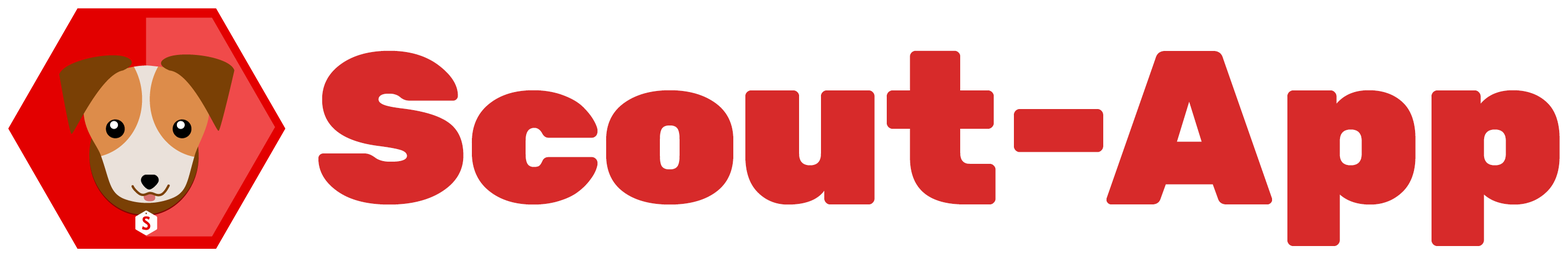
<style>
.page{position:relative;width:1568px;height:257px;background:#ffffff}
.page>*{position:absolute;margin:0}
.t1{font:219.2px "RubikOne-Regular";color:#d72a2a}
</style>
<div class="page">
<p class="t1" style="left:318px;top:50px;width:1242px;height:196px">Scout-App</p>
</div>
